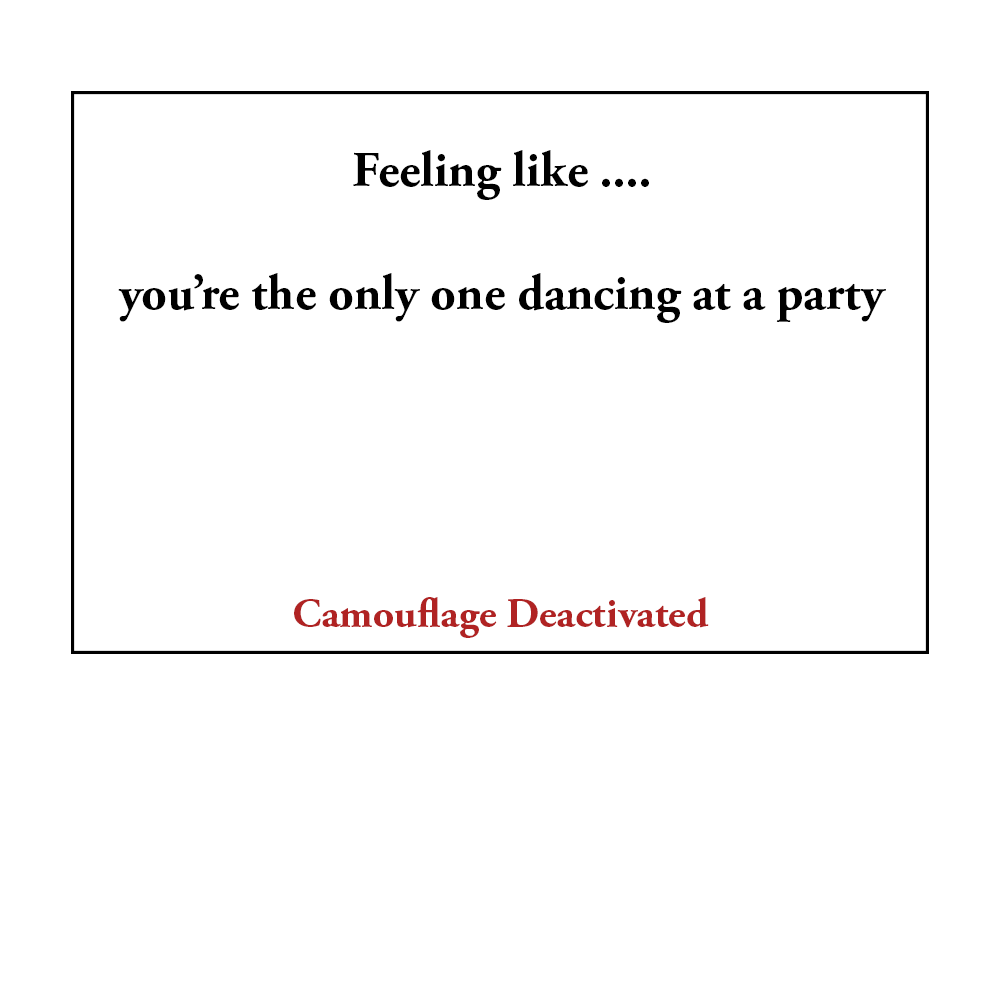
<style>
.page{position:relative;width:1000px;height:1000px;background:#ffffff}
.page>*{position:absolute;margin:0}
.t1{font:50px "AGaramondPro-Bold";color:#000000}
.t2{font:41.7px "AGaramondPro-Bold";color:#b02323}
</style>
<div class="page">
<p class="t1" style="left:353px;top:150px;width:296px;height:50px">Feeling like ....</p>
<p class="t1" style="left:118px;top:273px;width:768px;height:50px">you’re the only one dancing at a party</p>
<p class="t2" style="left:294px;top:597px;width:415px;height:41px">Camouflage Deactivated</p>
</div>
